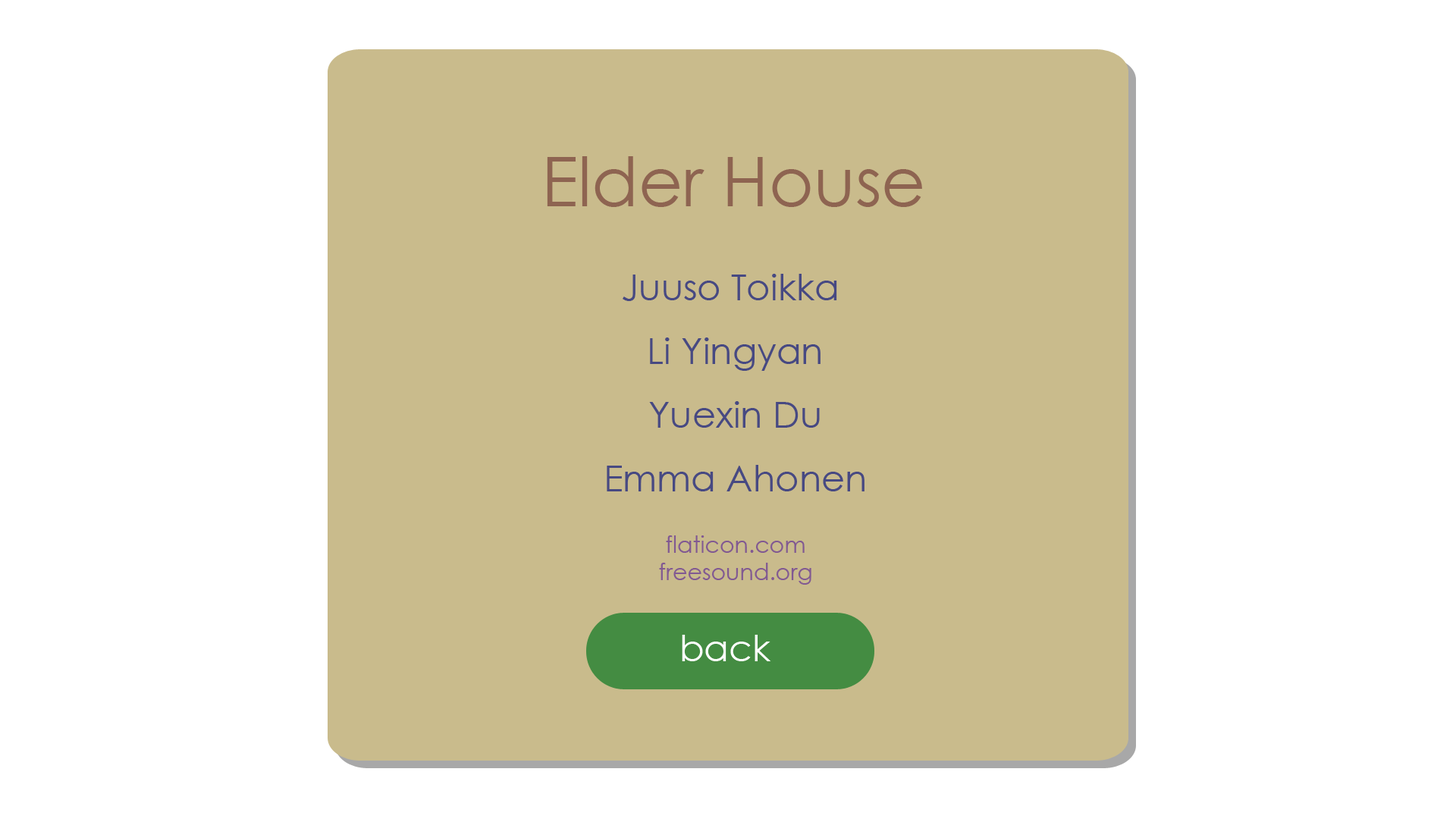
<style>
.page{position:relative;width:1456px;height:819px;background:#ffffff}
.page>*{position:absolute;margin:0}
.t1{font:68.2px "CenturyGothic";color:#8e6451}
.t2{font:36.4px "CenturyGothic";color:#474982}
.t3{font:22.7px/27.3px "CenturyGothic";color:#815992}
.t4{font:36.4px "CenturyGothic";color:#ffffff}
</style>
<div class="page">
<p class="t1" style="left:547px;top:156px;width:375px;height:51px">Elder House</p>
<p class="t2" style="left:607px;top:274px;width:257px;height:217px;text-align:center">Juuso Toikka <br>Li Yingyan<br>Yuexin Du<br>Emma Ahonen</p>
<p class="t3" style="left:659px;top:535px;width:152px;height:50px;text-align:center">flaticon.com<br>freesound.org</p>
<p class="t4" style="left:682px;top:635px;width:89px;height:26px">back</p>
</div>
